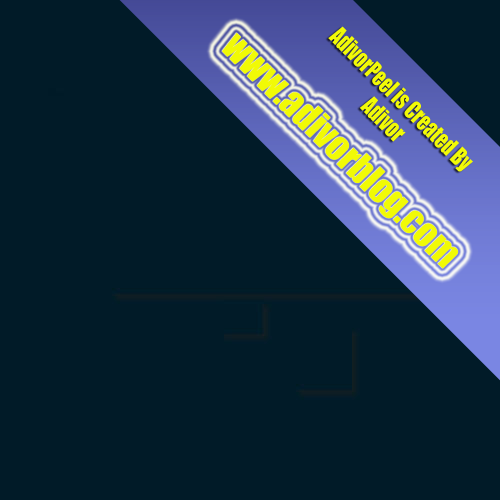
<style>
.page{position:relative;width:500px;height:500px;background:#011b28}
.page>*{position:absolute;margin:0}
.t1{font:23.2px/27.1px "Impact";color:#f1fa06;scale:0.82 1}
.t2{font:36.7px "Impact";color:#f1fa06}
</style>
<div class="page">
<p class="t1" style="left:328px;top:26px;width:145px;height:146px;text-align:center;rotate:45deg">AdivorPeel is Created By <br>Adivor</p>
<p class="t2" style="left:222px;top:32px;width:236px;height:237px;rotate:45deg">www.adivorblog.com</p>
</div>
